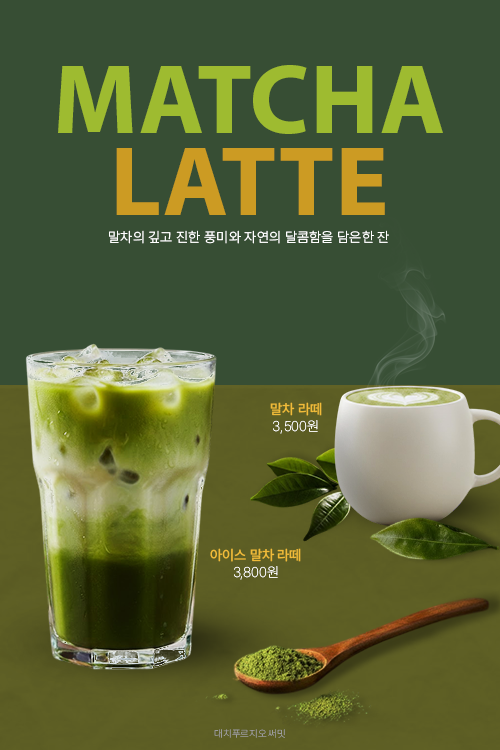
<style>
.page{position:relative;width:500px;height:750px;background:#374e34}
.page>*{position:absolute;margin:0}
.t1{font:100px/82px "MyriadPro-Bold";letter-spacing:-0.01em;color:#9ebb30;text-transform:uppercase}
.t2{font:100px/82px "MyriadPro-Bold";letter-spacing:-0.01em;color:#cc9b23;text-transform:uppercase}
.t3{font:14px "Pretendard-Light";letter-spacing:0.01em;color:#ffffff;text-transform:uppercase}
.t4{font:14px "Pretendard-Thin";color:#ffffff;text-transform:uppercase}
.t5{font:14px "Pretendard-Medium";color:#f0bb39;text-transform:uppercase}
.t6{font:10px "Pretendard-Thin";color:#9c9c9c;text-transform:uppercase}
</style>
<div class="page">
<p class="t1" style="left:58px;top:65px;width:385px;height:150px;text-align:center">Matcha<br><span class="t2">Latte</span></p>
<p class="t3" style="left:109px;top:230px;width:280px;height:14px">말차의 깊고 진한 풍미와 자연의 달콤함을 담은한 잔</p>
<p class="t4" style="left:270px;top:402px;width:52px;height:32px;text-align:center"><span class="t5">말차 라떼<br></span>3,500원</p>
<p class="t5" style="left:210px;top:548px;width:91px;height:32px;text-align:center">아이스 말차 라떼<br><span class="t4">3,800원</span></p>
<p class="t6" style="left:214px;top:729px;width:71px;height:9px">대치푸르지오 써밋</p>
</div>
